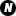
<style>
.page{position:relative;width:16px;height:16px;background:#000000}
.page>*{position:absolute;margin:0}
.t1{font:10px "HeadlineR-HM";color:#fbf8f8;font-style:italic}
</style>
<div class="page">
<p class="t1" style="left:4px;top:3px;width:9px;height:9px">N</p>
</div>
